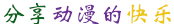
<style>
.page{position:relative;width:174px;height:24px;background:#ffffff}
.page>*{position:absolute;margin:0}
.t1{font:25px "STXinwei";color:#6d2f96}
.t2{font:25px "STXinwei";color:#0c651f}
.t3{font:25px "STXinwei";color:#edc611}
</style>
<div class="page">
<p class="t1" style="left:3px;top:2px;width:168px;height:23px"><span class="t2">分享</span>动漫的<span class="t3">快乐</span></p>
</div>
